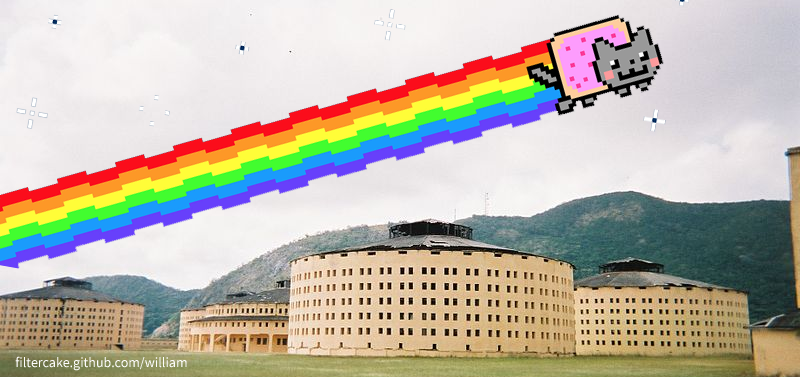
<style>
.page{position:relative;width:800px;height:377px}
.page>*{position:absolute;margin:0}
.t1{font:14px "SourceSansPro-Regular";color:#ffffff}
</style>
<div class="page">
<p class="t1" style="left:15px;top:356px;width:172px;height:15px">filtercake.github.com/william</p>
</div>
